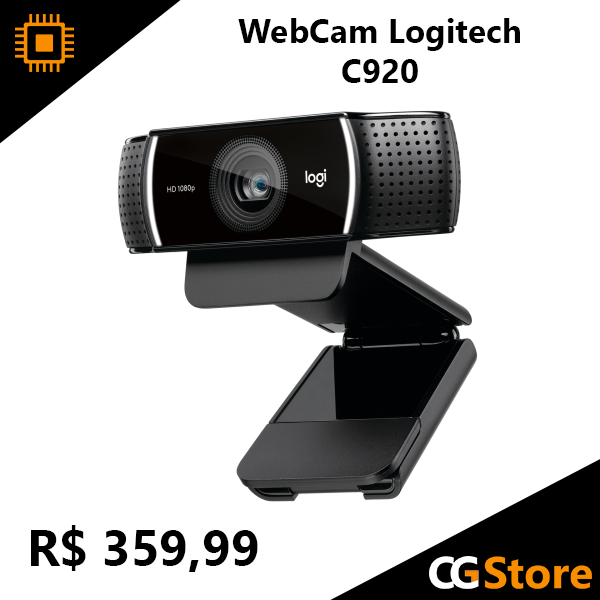
<style>
.page{position:relative;width:600px;height:600px;background:#ffffff}
.page>*{position:absolute;margin:0}
.t1{font:33.3px "SegoeUI-Bold";color:#000000}
.t2{font:50px "SegoeUI-Bold";color:#000000}
</style>
<div class="page">
<p class="t1" style="left:238px;top:18px;width:282px;height:65px;text-align:center">WebCam Logitech<br>C920</p>
<p class="t2" style="left:31px;top:525px;width:227px;height:47px">R$ 359,99</p>
</div>
